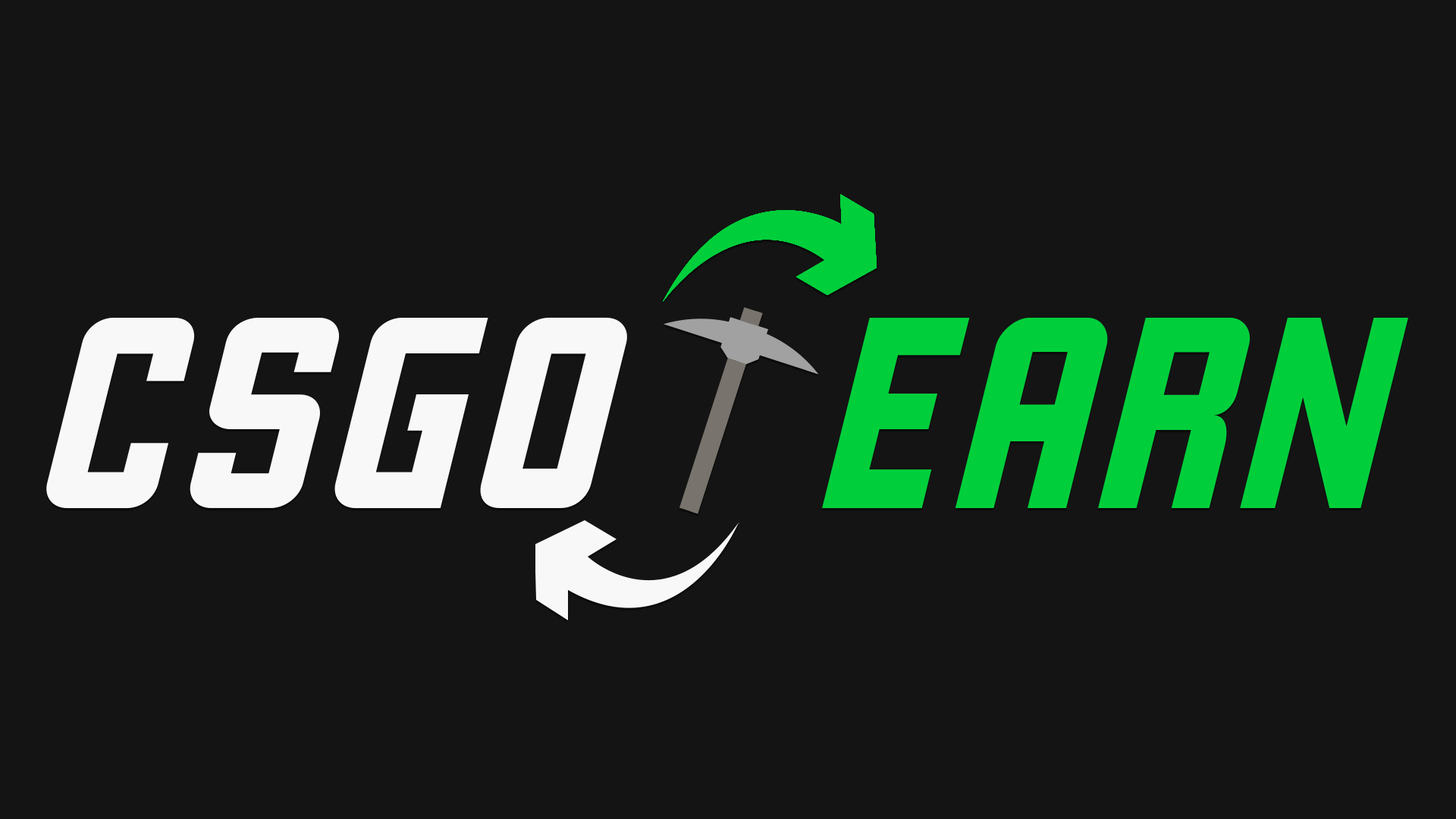
<style>
.page{position:relative;width:1456px;height:819px;background:#141414}
.page>*{position:absolute;margin:0}
.t1{font:297px "Liquorstore-Italic";color:#ffffff}
.t2{font:297px "Liquorstore-Italic";color:#00cf3b}
</style>
<div class="page">
<p class="t1" style="left:46px;top:317px;width:581px;height:192px">CSGO</p>
<p class="t2" style="left:822px;top:318px;width:586px;height:191px">EARN</p>
</div>
